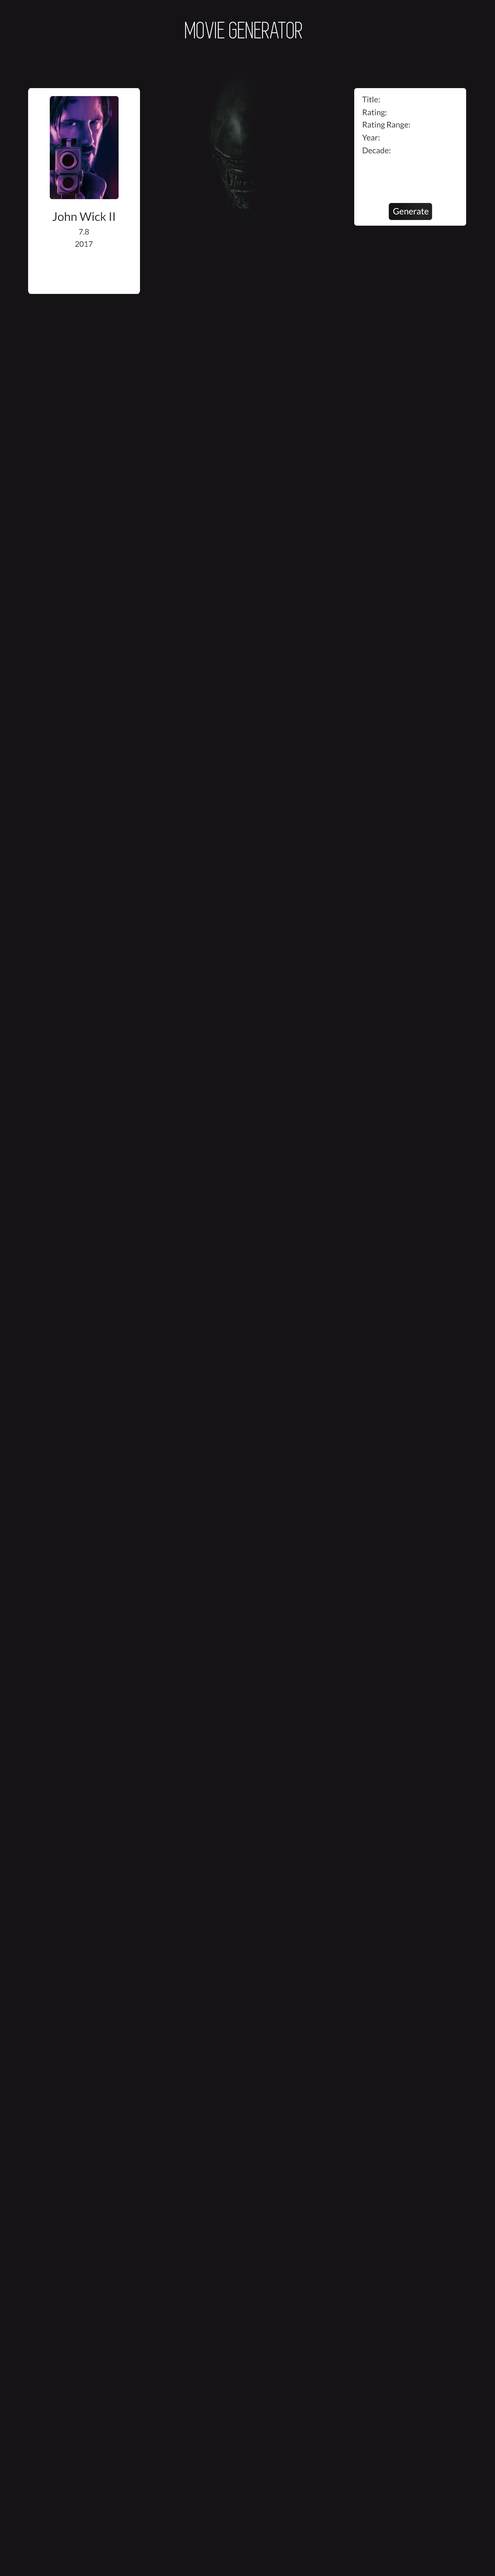
<style>
.page{position:relative;width:495px;height:2576px;background:#151316}
.page>*{position:absolute;margin:0}
.t1{font:24.4px "Simplifica";color:#ffffff}
.t2{font:8px "Lato-Regular";color:#333333}
.t3{font:8.7px "Lato-Regular";color:#ffffff}
.t4{font:11.8px "Lato-Regular";color:#333333}
.t5{font:7.7px "Lato-Regular";color:#333333}
</style>
<div class="page">
<p class="t1" style="left:185px;top:22px;width:117px;height:17px">MOVIE GENERATOR</p>
<p class="t2" style="left:362px;top:96px;width:17px;height:7px">Title:</p>
<p class="t2" style="left:362px;top:109px;width:24px;height:8px">Rating:</p>
<p class="t2" style="left:362px;top:122px;width:48px;height:7px">Rating Range:</p>
<p class="t2" style="left:362px;top:134px;width:17px;height:7px">Year:</p>
<p class="t2" style="left:362px;top:147px;width:28px;height:7px">Decade:</p>
<p class="t3" style="left:393px;top:208px;width:35px;height:7px">Generate</p>
<p class="t4" style="left:53px;top:212px;width:62px;height:9px">John Wick II</p>
<p class="t5" style="left:79px;top:229px;width:10px;height:6px">7.8</p>
<p class="t5" style="left:75px;top:241px;width:17px;height:6px">2017</p>
</div>
